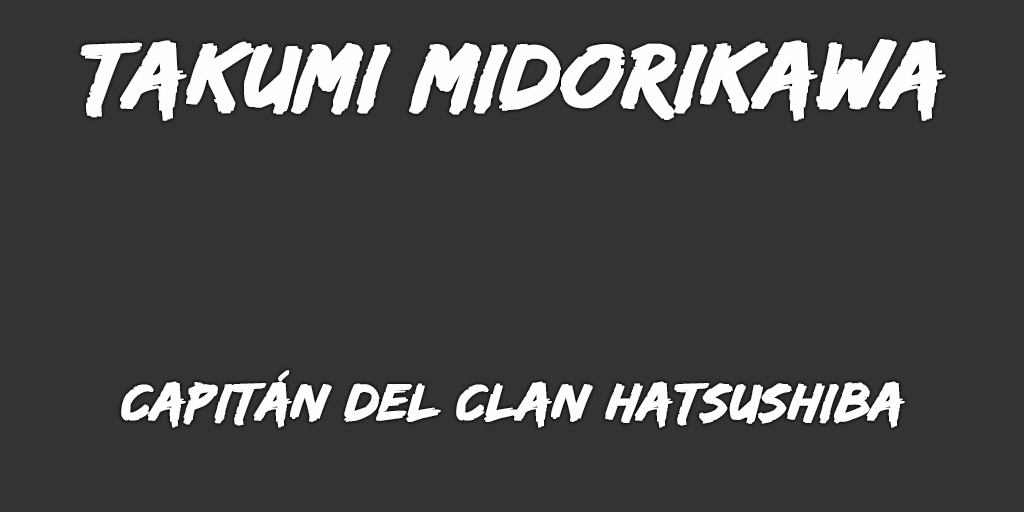
<style>
.page{position:relative;width:1024px;height:512px;background:#333333}
.page>*{position:absolute;margin:0}
.t1{font:95px "EdoSZ";color:#fefefe;font-weight:bold;font-style:italic;scale:1.04 1}
.t2{font:54px "EdoSZ";color:#fefefe;font-weight:bold;font-style:italic;scale:1.04 1}
</style>
<div class="page">
<p class="t1" style="left:80px;top:39px;width:866px;height:82px">takumi midorikawa</p>
<p class="t2" style="left:121px;top:370px;width:784px;height:58px">capitán del Clan Hatsushiba</p>
</div>
